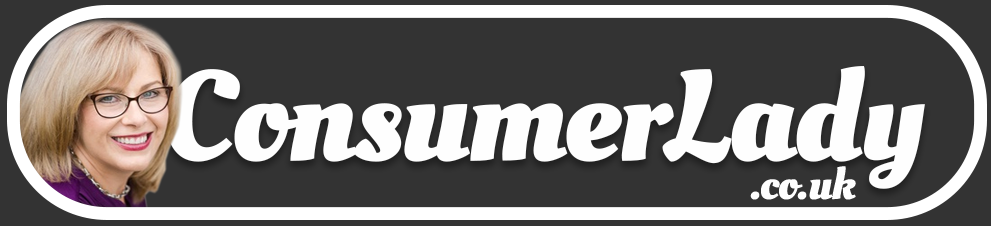
<style>
.page{position:relative;width:991px;height:226px;background:#333333}
.page>*{position:absolute;margin:0}
.t1{font:128.3px "OleoScript-Bold";letter-spacing:-0.025em;color:#fefefe}
.t2{font:44.7px "OleoScript-Bold";letter-spacing:-0.025em;color:#fefefe}
</style>
<div class="page">
<p class="t1" style="left:167px;top:66px;width:758px;height:123px">ConsumerLady</p>
<p class="t2" style="left:750px;top:166px;width:106px;height:34px">.co.uk</p>
</div>
